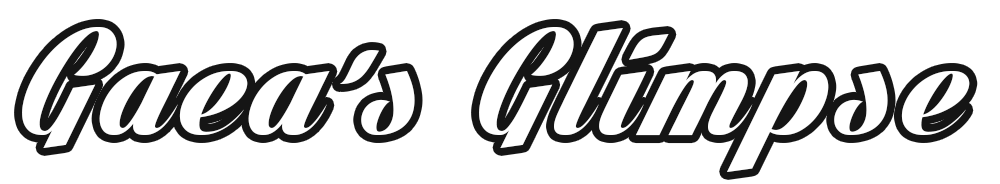
<style>
.page{position:relative;width:1000px;height:184px;background:#ffffff}
.page>*{position:absolute;margin:0}
.t1{font:158.8px "LighthousePersonalUse";letter-spacing:0.06em;color:#ffffff}
</style>
<div class="page">
<p class="t1" style="left:22px;top:27px;width:948px;height:145px">Gaea’s Glimpse</p>
</div>
